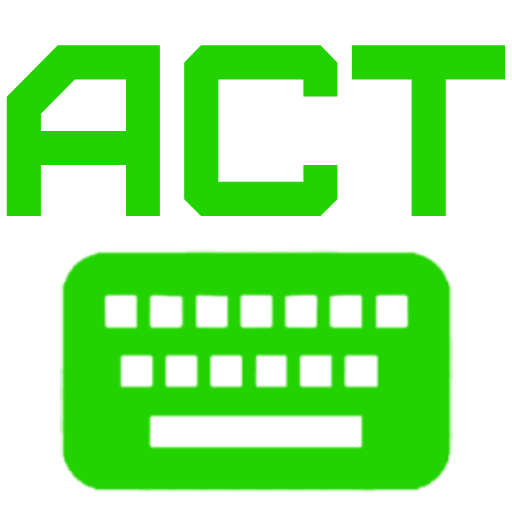
<style>
.page{position:relative;width:512px;height:512px;background:#ffffff}
.page>*{position:absolute;margin:0}
.t1{font:243.9px "Furore";color:#23d300}
</style>
<div class="page">
<p class="t1" style="left:6px;top:45px;width:500px;height:171px">ACT</p>
</div>
